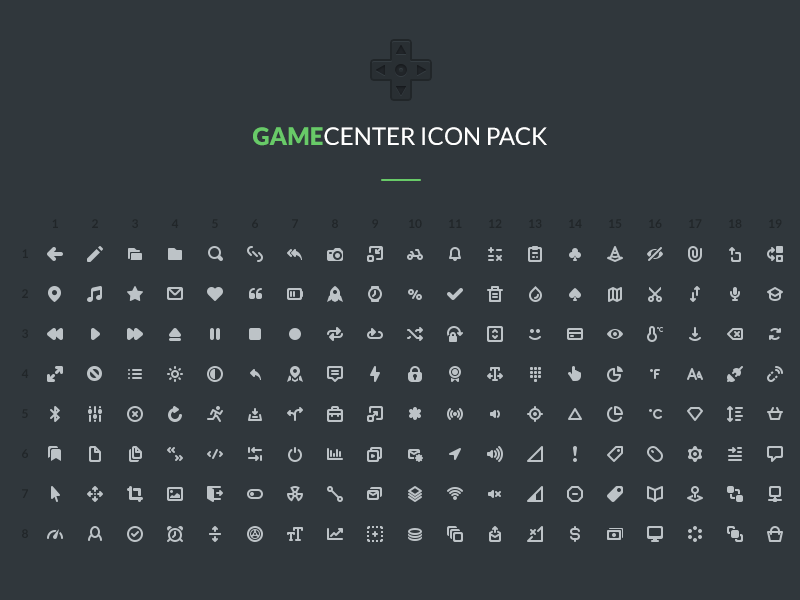
<style>
.page{position:relative;width:800px;height:600px;background:#30373c}
.page>*{position:absolute;margin:0}
.t1{font:24px "Lato-Regular";color:#ffffff;text-transform:uppercase}
.t2{font:24px "Lato-Black";color:#68ca68;text-transform:uppercase}
.t3{font:12px "Lato-Bold";color:#212629}
</style>
<div class="page">
<p class="t1" style="left:253px;top:127px;width:294px;height:19px"><span class="t2">Game</span>center icon pack</p>
<p class="t3" style="left:52px;top:219px;width:6px;height:9px">1</p>
<p class="t3" style="left:92px;top:219px;width:6px;height:9px">2</p>
<p class="t3" style="left:132px;top:219px;width:6px;height:9px">3</p>
<p class="t3" style="left:171px;top:219px;width:8px;height:9px">4</p>
<p class="t3" style="left:212px;top:219px;width:6px;height:9px">5</p>
<p class="t3" style="left:252px;top:219px;width:6px;height:9px">6</p>
<p class="t3" style="left:292px;top:219px;width:6px;height:9px">7</p>
<p class="t3" style="left:332px;top:219px;width:6px;height:9px">8</p>
<p class="t3" style="left:372px;top:219px;width:6px;height:9px">9</p>
<p class="t3" style="left:409px;top:219px;width:13px;height:9px">10</p>
<p class="t3" style="left:449px;top:219px;width:13px;height:9px">11</p>
<p class="t3" style="left:489px;top:219px;width:13px;height:9px">12</p>
<p class="t3" style="left:529px;top:219px;width:13px;height:9px">13</p>
<p class="t3" style="left:569px;top:219px;width:13px;height:9px">14</p>
<p class="t3" style="left:609px;top:219px;width:13px;height:9px">15</p>
<p class="t3" style="left:649px;top:219px;width:13px;height:9px">16</p>
<p class="t3" style="left:689px;top:219px;width:13px;height:9px">17</p>
<p class="t3" style="left:729px;top:219px;width:13px;height:9px">18</p>
<p class="t3" style="left:769px;top:219px;width:13px;height:9px">19</p>
<p class="t3" style="left:22px;top:249px;width:6px;height:9px">1</p>
<p class="t3" style="left:22px;top:289px;width:6px;height:9px">2</p>
<p class="t3" style="left:22px;top:329px;width:6px;height:9px">3</p>
<p class="t3" style="left:21px;top:369px;width:8px;height:9px">4</p>
<p class="t3" style="left:22px;top:409px;width:6px;height:9px">5</p>
<p class="t3" style="left:22px;top:449px;width:6px;height:9px">6</p>
<p class="t3" style="left:22px;top:489px;width:6px;height:9px">7</p>
<p class="t3" style="left:22px;top:529px;width:6px;height:9px">8</p>
</div>
